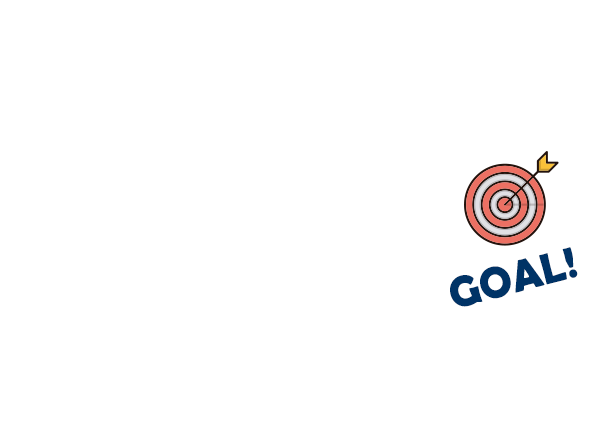
<style>
.page{position:relative;width:600px;height:448px;background:#ffffff}
.page>*{position:absolute;margin:0}
.t1{font:44px "BerlinSansFBDemi-Bold";color:#003366}
</style>
<div class="page">
<p class="t1" style="left:450px;top:247px;width:128px;height:60px;rotate:-15deg">GOAL!</p>
</div>
